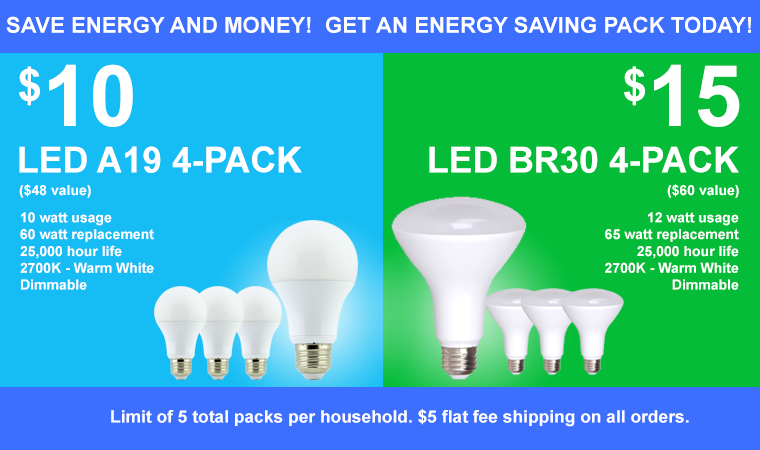
<style>
.page{position:relative;width:760px;height:450px;background:#15bdf4}
.page>*{position:absolute;margin:0}
.t1{font:21.9px "Arial-BoldMT";color:#ffffff}
.t2{font:85px "Arial-BoldMT";color:#ffffff}
.t3{font:76px "Arial-BoldMT";color:#ffffff}
.t4{font:35.6px "Arial-BoldMT";color:#ffffff;text-transform:uppercase}
.t5{font:14px "Arial-BoldMT";color:#ffffff}
.t6{font:17px "Arial-BoldMT";color:#ffffff}
</style>
<div class="page">
<p class="t1" style="left:6px;top:16px;width:745px;height:17px">SAVE ENERGY AND MONEY!  GET AN ENERGY SAVING PACK TODAY!</p>
<p class="t2" style="left:19px;top:64px;width:114px;height:63px"><span class="t3">$</span>10</p>
<p class="t2" style="left:624px;top:64px;width:116px;height:63px"><span class="t3">$</span>15</p>
<p class="t4" style="left:19px;top:146px;width:283px;height:27px">LED A19 4-pack</p>
<p class="t4" style="left:429px;top:146px;width:310px;height:27px">LED BR30 4-pack</p>
<p class="t5" style="left:19px;top:184px;width:72px;height:14px">($48 value)</p>
<p class="t5" style="left:667px;top:184px;width:72px;height:14px">($60 value)</p>
<p class="t5" style="left:20px;top:212px;width:134px;height:78px">10 watt usage<br>60 watt replacement<br>25,000 hour life<br>2700K - Warm White<br>Dimmable</p>
<p class="t5" style="left:605px;top:212px;width:134px;height:78px;text-align:right">12 watt usage<br>65 watt replacement<br>25,000 hour life<br>2700K - Warm White<br>Dimmable</p>
<p class="t6" style="left:111px;top:409px;width:578px;height:18px">Limit of 5 total packs per household. $5 flat fee shipping on all orders.</p>
</div>
